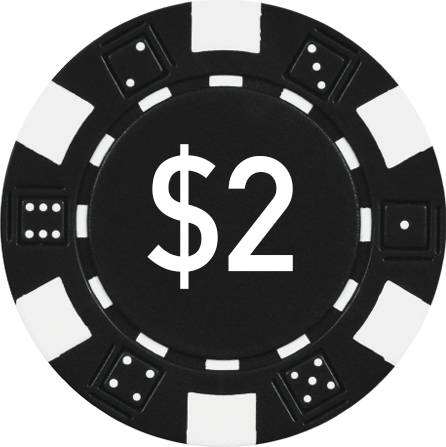
<style>
.page{position:relative;width:446px;height:447px;background:#ffffff}
.page>*{position:absolute;margin:0}
.t1{font:160px "DINAlternate-Bold";color:#ffffff}
</style>
<div class="page">
<p class="t1" style="left:147px;top:144px;width:146px;height:145px">$2</p>
</div>
